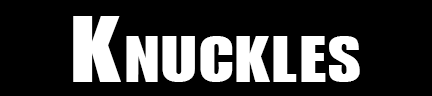
<style>
.page{position:relative;width:432px;height:96px;background:#000000}
.page>*{position:absolute;margin:0}
.t1{font:90.1px "Genuine";letter-spacing:0.04em;color:#ffffff;font-variant:small-caps;scale:1.17 1}
</style>
<div class="page">
<p class="t1" style="left:73px;top:16px;width:287px;height:66px">Knuckles</p>
</div>
